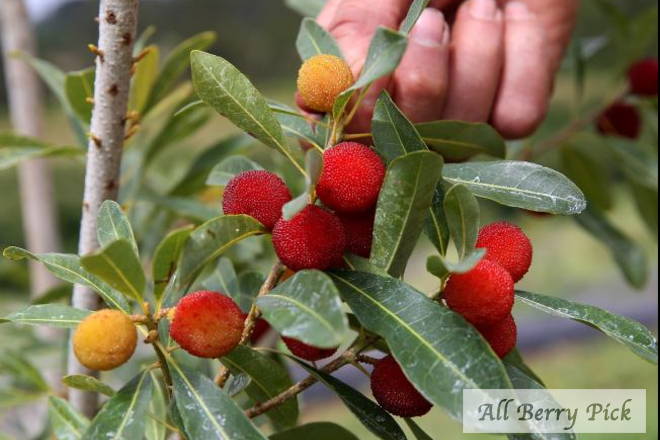
<style>
.page{position:relative;width:660px;height:440px}
.page>*{position:absolute;margin:0}
.t1{font:23.6px "Apple-Chancery";font-weight:bold}
</style>
<div class="page">
<p class="t1" style="left:478px;top:399px;width:154px;height:31px">All Berry Pick</p>
</div>
